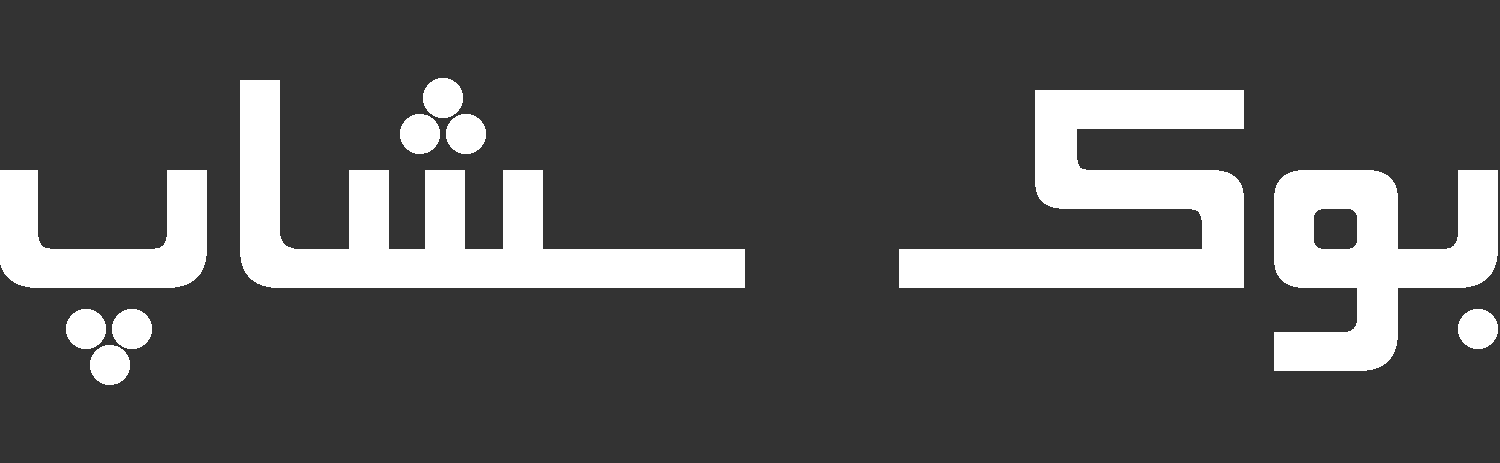
<style>
.page{position:relative;width:1500px;height:463px;background:#333333}
.page>*{position:absolute;margin:0}
.t1{font:374.9px "BElham";color:#ffffff}
</style>
<div class="page">
<p class="t1" style="left:0px;top:78px;width:1498px;height:307px">بوکـ   ــشاپ</p>
</div>
